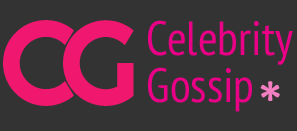
<style>
.page{position:relative;width:297px;height:131px;background:#333333}
.page>*{position:absolute;margin:0}
.t1{font:118px "Righteous-Regular";letter-spacing:-0.11em;color:#f0176e}
.t2{font:48px/47px "PTSans-Narrow";color:#ea0086}
.t3{font:48px "IstokWeb-Bold";color:#f37ec1;text-transform:uppercase}
</style>
<div class="page">
<p class="t1" style="left:3px;top:20px;width:131px;height:86px">CG</p>
<p class="t2" style="left:148px;top:20px;width:145px;height:92px">Celebrity<br>Gossip</p>
<p class="t3" style="left:260px;top:81px;width:20px;height:20px">*</p>
</div>
